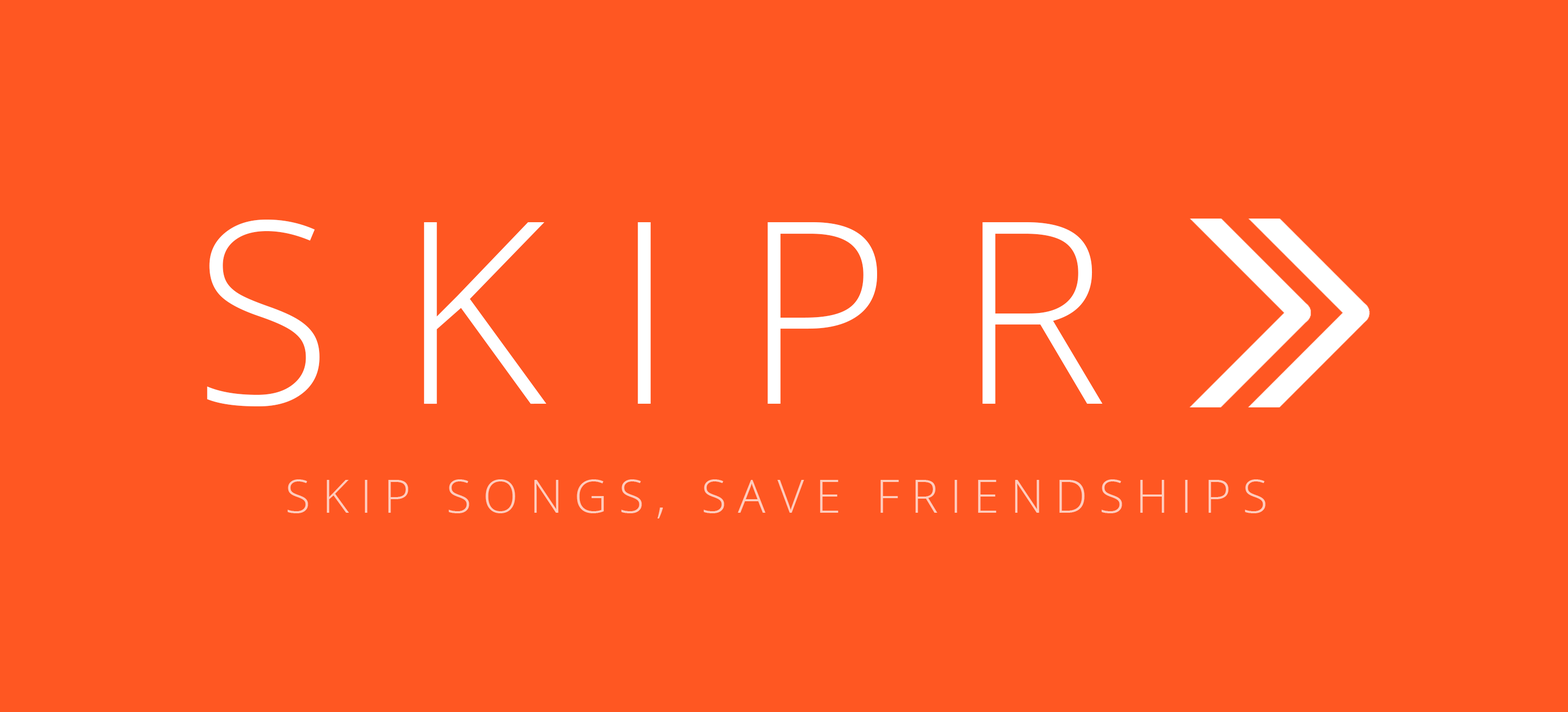
<style>
.page{position:relative;width:1568px;height:712px;background:#ff5722}
.page>*{position:absolute;margin:0}
.t1{font:254.2px "OpenSans-Light";letter-spacing:0.26em;color:#ffffff}
.t2{font:45.6px "OpenSans-Light";letter-spacing:0.26em;color:#ffccbc}
</style>
<div class="page">
<p class="t1" style="left:207px;top:220px;width:896px;height:186px">SKIPR</p>
<p class="t2" style="left:287px;top:479px;width:979px;height:39px">SKIP SONGS, SAVE FRIENDSHIPS</p>
</div>
